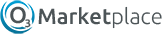
<style>
.page{position:relative;width:162px;height:34px;background:#ffffff}
.page>*{position:absolute;margin:0}
.t1{font:23px "Ubuntu-Medium";color:#4c5457;text-transform:uppercase}
.t2{font:22px "Ubuntu-Medium";color:#4c5457}
.t3{font:22px "Ubuntu-Light";color:#4c5457}
.t4{font:18.5px "Ubuntu-Medium";color:#4c5457;text-transform:uppercase}
</style>
<div class="page">
<p class="t1" style="left:10px;top:6px;width:16px;height:18px">O</p>
<p class="t2" style="left:38px;top:6px;width:124px;height:23px">Market<span class="t3">place</span></p>
<p class="t4" style="left:25px;top:19px;width:6px;height:9px">3</p>
</div>
